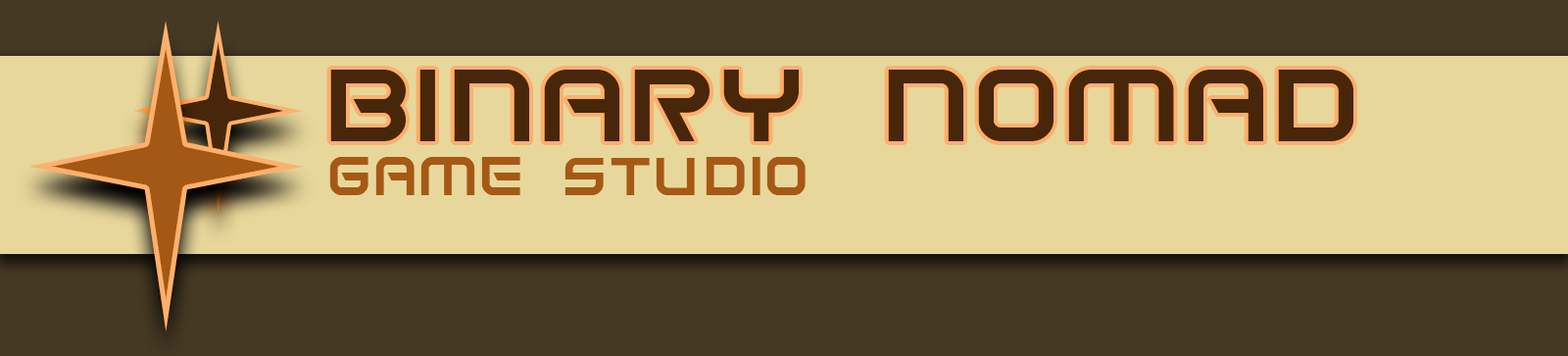
<style>
.page{position:relative;width:1568px;height:356px;background:#e8d79b}
.page>*{position:absolute;margin:0}
.t1{font:114.3px "SpaceFrigate";color:#472609;scale:1.05 1}
.t2{font:114.3px "SpaceFrigate";letter-spacing:-0.04em;color:#472609;scale:1.05 1}
.t3{font:60.1px "SpaceFrigate";color:#a55915}
</style>
<div class="page">
<p class="t1" style="left:330px;top:70px;width:1024px;height:71px">B<span class="t2">I</span>NARY NOMAD</p>
<p class="t3" style="left:329px;top:157px;width:477px;height:38px">Game STUDIO</p>
</div>
